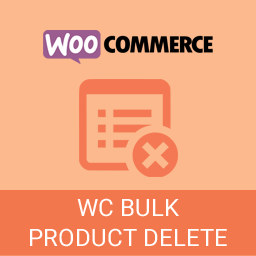
<style>
.page{position:relative;width:256px;height:256px;background:#fbb98d}
.page>*{position:absolute;margin:0}
.t1{font:24px/30px "Roboto-Regular";color:#ffffff;text-transform:uppercase}
</style>
<div class="page">
<p class="t1" style="left:30px;top:198px;width:197px;height:49px;text-align:center">wc bulk<br>product delete</p>
</div>
